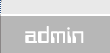
<style>
.page{position:relative;width:110px;height:53px;background:#b7b7b7}
.page>*{position:absolute;margin:0}
.t1{font:24px "OrbitBbyBT-Regular";color:#ffffff}
</style>
<div class="page">
<p class="t1" style="left:25px;top:26px;width:59px;height:17px">admin</p>
</div>
